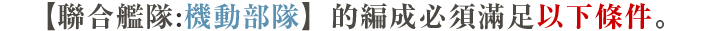
<style>
.page{position:relative;width:712px;height:31px;background:#ffffff}
.page>*{position:absolute;margin:0}
.t1{font:28px "RyuminPr6N-ExBold";letter-spacing:0.05em;color:#4c4843}
.t2{font:28px "RyuminPr6N-ExBold";letter-spacing:0.05em;color:#323232}
.t3{font:28px "RyuminPr6N-ExBold";letter-spacing:0.05em;color:#5b92b2}
.t4{font:28px "RyuminPr6N-ExBold";letter-spacing:0.05em;color:#cc0000}
</style>
<div class="page">
<p class="t1" style="left:47px;top:2px;width:617px;height:29px">【聯合艦隊<span class="t2">:</span><span class="t3">機動部隊</span>】的編成必須滿足<span class="t4">以下條件</span>。</p>
</div>
